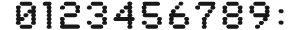
<style>
.page{position:relative;width:300px;height:30px;background:#ffffff}
.page>*{position:absolute;margin:0}
.t1{font:40px "SynchroLET";letter-spacing:0.1em;color:#181818}
</style>
<div class="page">
<p class="t1" style="left:15px;top:1px;width:255px;height:28px">0123456789</p>
<p class="t1" style="left:278px;top:9px;width:6px;height:16px">:</p>
</div>
